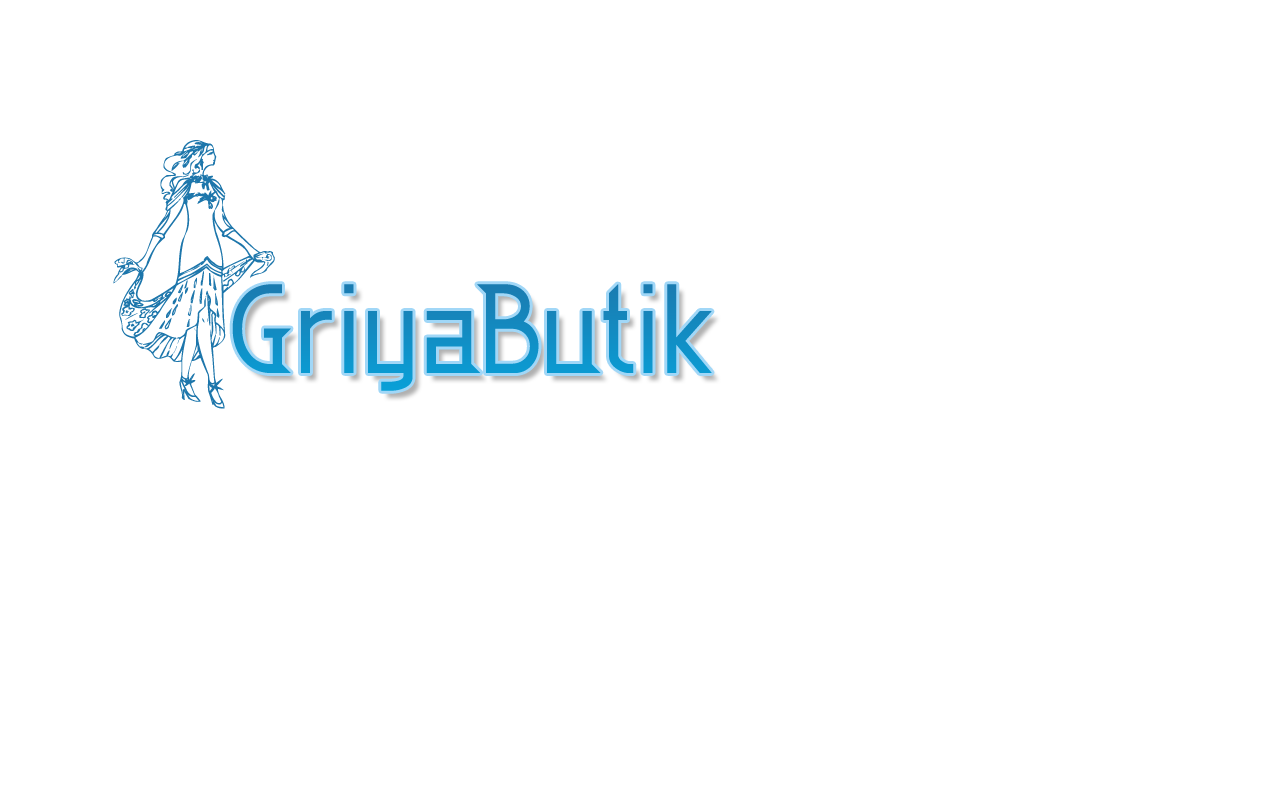
<style>
.page{position:relative;width:1280px;height:800px;background:#ffffff}
.page>*{position:absolute;margin:0}
.t1{font:339.9px "FashionLadies";letter-spacing:0.055em;color:#1d76ab}
.t2{font:122.7px "EdenMills";color:#118fc5}
</style>
<div class="page">
<p class="t1" style="left:113px;top:140px;width:162px;height:269px">f</p>
<p class="t2" style="left:232px;top:284px;width:480px;height:107px">GriyaButik</p>
</div>
